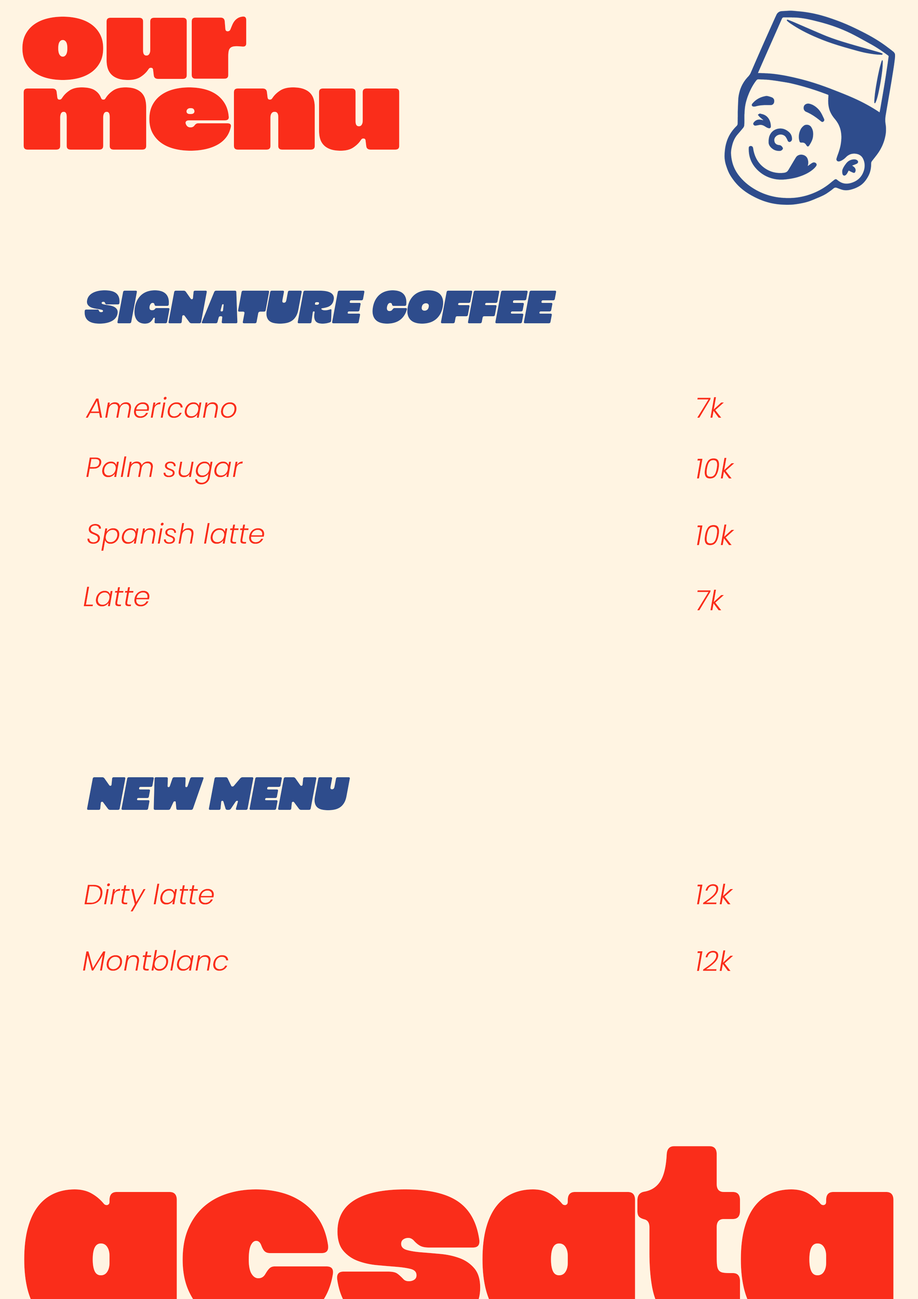
<style>
.page{position:relative;width:918px;height:1299px;background:#fff4e2}
.page>*{position:absolute;margin:0}
.t1{font:122.1px/71px "ChunkoBoldDemo";color:#fa2d1a;scale:1.07 1}
.t2{font:46.3px "ChunkoBoldDemo";color:#2e4c8c;font-style:italic;scale:1.07 1}
.t3{font:27.8px "Poppins-LightItalic";color:#fa2d1a}
</style>
<div class="page">
<p class="t1" style="left:22px;top:16px;width:377px;height:135px">our <br>menu</p>
<p class="t2" style="left:84px;top:290px;width:472px;height:34px">SIGNATURE COFFEE</p>
<p class="t3" style="left:86px;top:397px;width:151px;height:21px">Americano</p>
<p class="t3" style="left:697px;top:397px;width:27px;height:21px">7k</p>
<p class="t3" style="left:86px;top:456px;width:157px;height:28px">Palm sugar</p>
<p class="t3" style="left:697px;top:458px;width:38px;height:21px">10k</p>
<p class="t3" style="left:87px;top:522px;width:177px;height:29px">Spanish latte</p>
<p class="t3" style="left:697px;top:524px;width:38px;height:21px">10k</p>
<p class="t3" style="left:84px;top:586px;width:66px;height:20px">Latte</p>
<p class="t3" style="left:697px;top:589px;width:27px;height:21px">7k</p>
<p class="t2" style="left:87px;top:777px;width:263px;height:33px">NEW MENU</p>
<p class="t3" style="left:84px;top:883px;width:130px;height:28px">Dirty latte</p>
<p class="t3" style="left:697px;top:883px;width:36px;height:21px">12k</p>
<p class="t3" style="left:83px;top:950px;width:145px;height:21px">Montblanc</p>
<p class="t3" style="left:697px;top:950px;width:36px;height:21px">12k</p>
</div>
